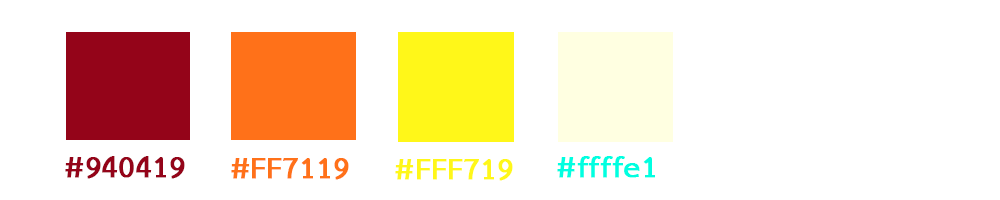
<style>
.page{position:relative;width:1000px;height:200px;background:#ffffff}
.page>*{position:absolute;margin:0}
.t1{font:41.7px "THSarabunNew-Bold";color:#940419;font-weight:bold}
.t2{font:41.7px "THSarabunNew-Bold";color:#ff7119;font-weight:bold}
.t3{font:41.7px "THSarabunNew-Bold";color:#fff719;font-weight:bold}
.t4{font:41.7px "THSarabunNew-Bold";color:#00ffe1;font-weight:bold}
</style>
<div class="page">
<p class="t1" style="left:65px;top:156px;width:120px;height:23px">#940419</p>
<p class="t2" style="left:231px;top:158px;width:118px;height:22px">#FF7119</p>
<p class="t3" style="left:395px;top:159px;width:118px;height:22px">#FFF719</p>
<p class="t4" style="left:557px;top:156px;width:98px;height:22px">#ffffe1</p>
</div>
